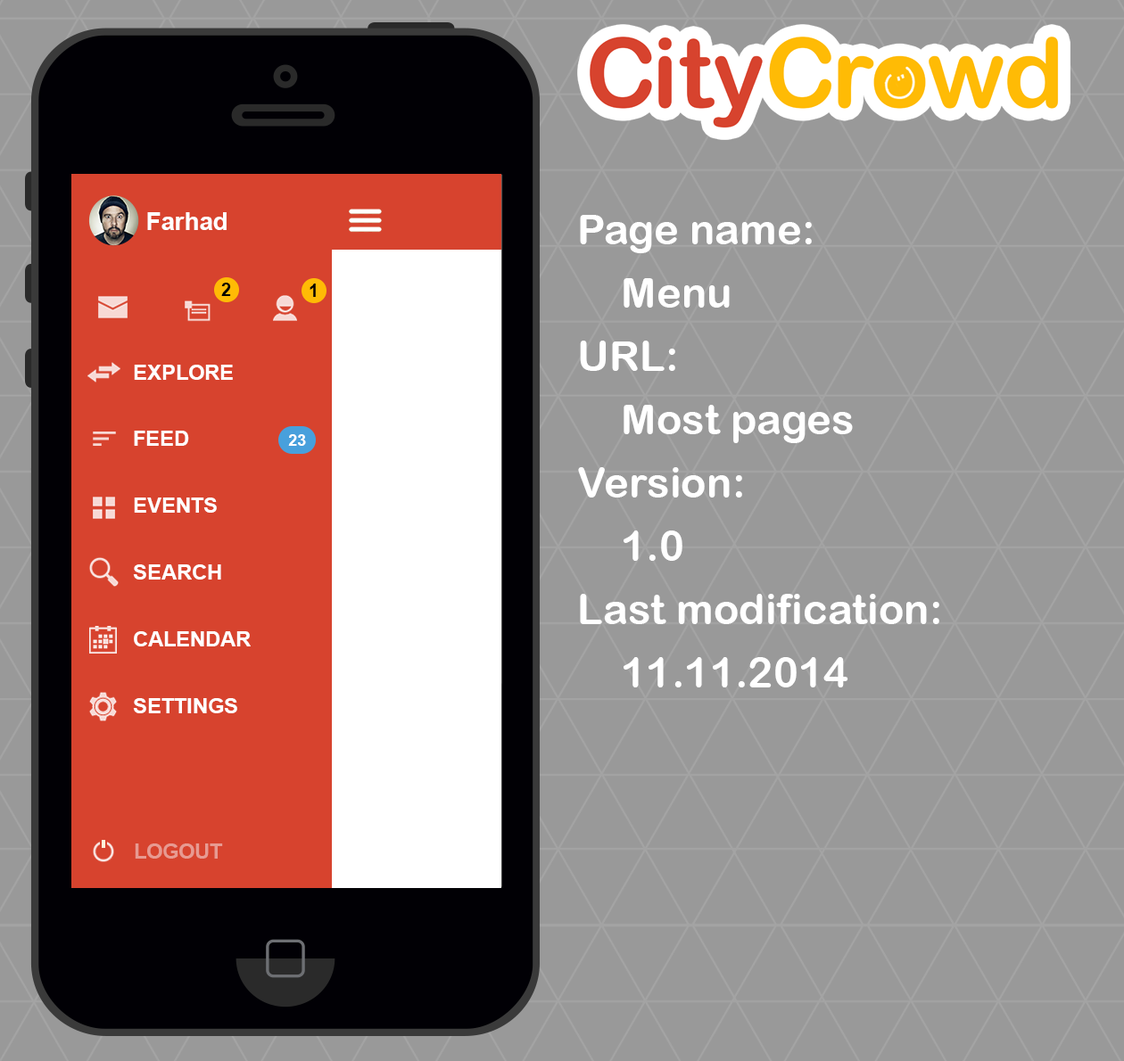
<style>
.page{position:relative;width:1124px;height:1061px;background:#999999}
.page>*{position:absolute;margin:0}
.t1{font:24.6px "Arial-BoldMT";color:#ffffff}
.t2{font:42.2px/63.3px "ArialRoundedMTBold";color:#ffffff}
.t3{font:17.6px "Arial-BoldMT";color:#000000}
.t4{font:21.1px/66.8px "Arial-BoldMT";color:#ffffff}
.t5{font:15.8px "Arial-BoldMT";color:#ffffff}
.t6{font:21.1px "Arial-BoldMT";color:#e79a91}
</style>
<div class="page">
<p class="t1" style="left:147px;top:212px;width:80px;height:18px">Farhad</p>
<p class="t2" style="left:578px;top:215px;width:361px;height:473px">Page name:<br>Menu <br>URL:<br>Most pages<br>Version:<br>1.0<br>Last modification:<br>11.11.2014</p>
<p class="t3" style="left:221px;top:283px;width:10px;height:13px">2</p>
<p class="t3" style="left:309px;top:284px;width:7px;height:13px">1</p>
<p class="t4" style="left:133px;top:365px;width:118px;height:348px">EXPLORE<br>FEED<br>EVENTS<br>SEARCH<br>CALENDAR<br>SETTINGS</p>
<p class="t5" style="left:288px;top:434px;width:18px;height:12px">23</p>
<p class="t6" style="left:135px;top:844px;width:88px;height:15px">LOGOUT</p>
</div>
